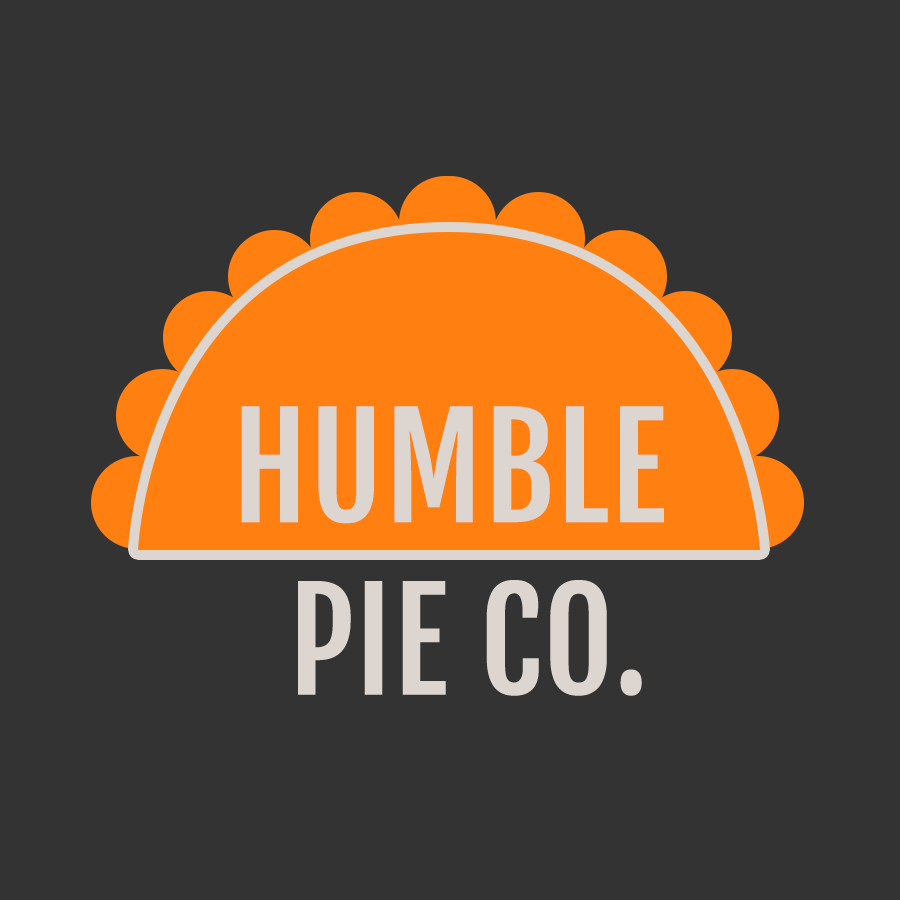
<style>
.page{position:relative;width:900px;height:900px;background:#333333}
.page>*{position:absolute;margin:0}
.t1{font:138.9px "FjallaOne-Regular";letter-spacing:0.01em;color:#ddd6d0;text-transform:uppercase}
.t2{font:136.2px "FjallaOne-Regular";letter-spacing:0.01em;color:#ddd6d0;text-transform:uppercase}
</style>
<div class="page">
<p class="t1" style="left:241px;top:406px;width:423px;height:118px">humblE</p>
<p class="t2" style="left:298px;top:580px;width:344px;height:116px">Pie co.</p>
</div>
